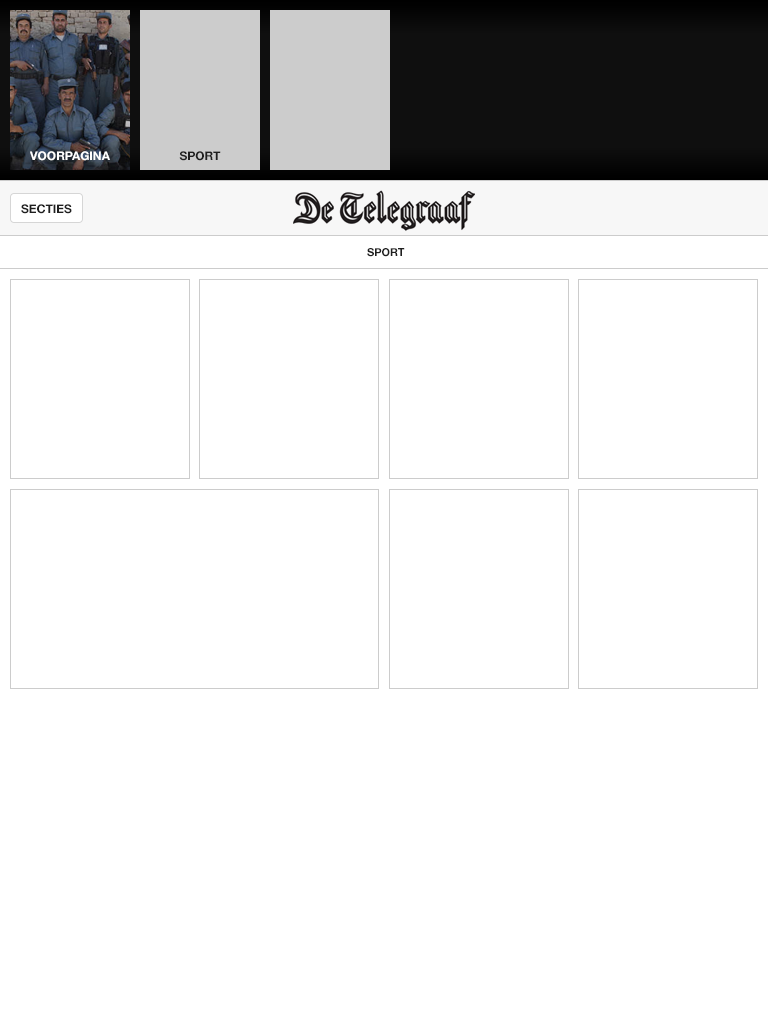
<style>
.page{position:relative;width:768px;height:1024px;background:#ffffff}
.page>*{position:absolute;margin:0}
.t1{font:12px "HelveticaNeue-Bold";color:#ffffff;text-transform:uppercase}
.t2{font:12px "HelveticaNeue-Bold";color:#1f1f1f;text-transform:uppercase}
.t3{font:12px "HelveticaNeue-Bold";color:#1f1f1f}
.t4{font:11px "HelveticaNeue-Bold";color:#1f1f1f;text-transform:uppercase}
</style>
<div class="page">
<p class="t1" style="left:30px;top:151px;width:80px;height:10px">voorpagina</p>
<p class="t2" style="left:179px;top:151px;width:42px;height:10px">sport</p>
<p class="t3" style="left:21px;top:204px;width:51px;height:10px">SECTIES</p>
<p class="t4" style="left:367px;top:248px;width:38px;height:9px">SPORT</p>
</div>
